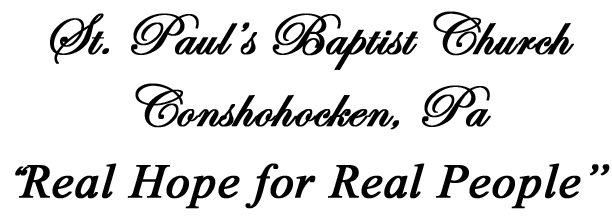
<style>
.page{position:relative;width:612px;height:216px;background:#ffffff}
.page>*{position:absolute;margin:0}
.t1{font:60px "EdwardianScriptITC";color:#000000;font-weight:bold}
.t2{font:60px "Vijaya";color:#000000;font-weight:bold}
</style>
<div class="page">
<p class="t1" style="left:15px;top:11px;width:595px;height:198px;text-align:center">St. Paul’s Baptist Church<br>Conshohocken, Pa<br>“<span class="t2">Real Hope for Real People”</span></p>
</div>
